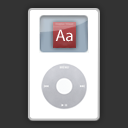
<style>
.page{position:relative;width:128px;height:128px;background:#333333}
.page>*{position:absolute;margin:0}
.t1{font:16.7px "MyriadPro-Regular";letter-spacing:-0.02em;color:#ffffff}
</style>
<div class="page">
<p class="t1" style="left:55px;top:29px;width:18px;height:13px">Aa</p>
</div>
